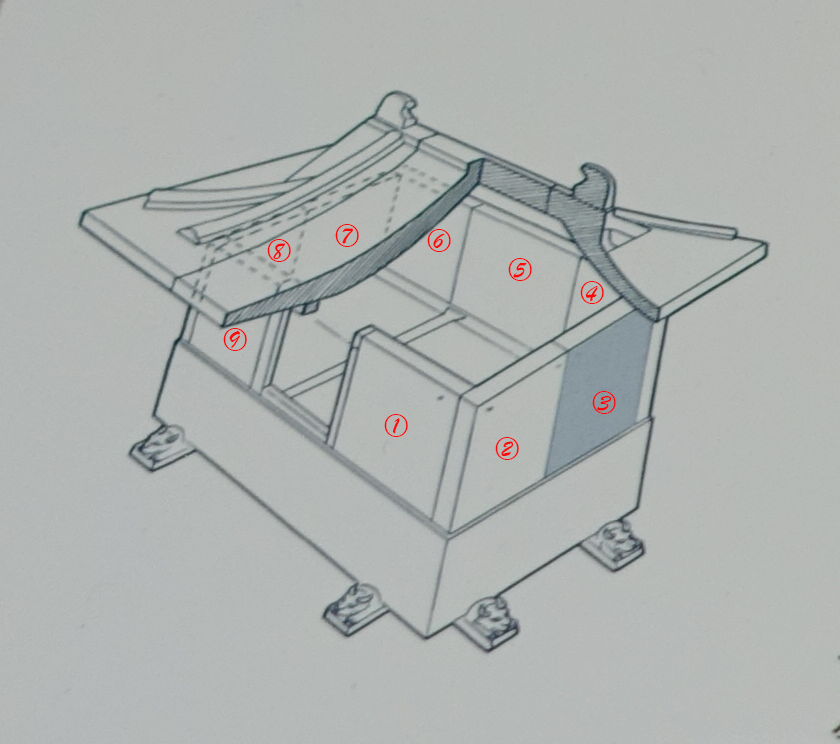
<style>
.page{position:relative;width:840px;height:744px}
.page>*{position:absolute;margin:0}
.t1{font:24.3px "STXingkai";color:#fc0a0a}
</style>
<div class="page">
<p class="t1" style="left:335px;top:224px;width:24px;height:23px">⑦</p>
<p class="t1" style="left:427px;top:229px;width:24px;height:23px">⑥</p>
<p class="t1" style="left:267px;top:239px;width:24px;height:23px">⑧</p>
<p class="t1" style="left:508px;top:258px;width:24px;height:23px">⑤</p>
<p class="t1" style="left:580px;top:281px;width:24px;height:23px">④</p>
<p class="t1" style="left:223px;top:328px;width:24px;height:23px">⑨</p>
<p class="t1" style="left:592px;top:391px;width:24px;height:23px">③</p>
<p class="t1" style="left:384px;top:414px;width:24px;height:23px">①</p>
<p class="t1" style="left:495px;top:437px;width:24px;height:23px">②</p>
</div>
